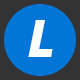
<style>
.page{position:relative;width:80px;height:80px;background:#0176d6}
.page>*{position:absolute;margin:0}
.t1{font:57px "SourceSansPro-BlackItalic";color:#ffffff}
</style>
<div class="page">
<p class="t1" style="left:28px;top:20px;width:25px;height:37px">L</p>
</div>
